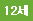
<style>
.page{position:relative;width:33px;height:21px;background:#6bac37}
.page>*{position:absolute;margin:0}
.t1{font:12px "Dotum";color:#ffffff;font-weight:bold}
</style>
<div class="page">
<p class="t1" style="left:5px;top:5px;width:23px;height:11px">12세</p>
</div>
